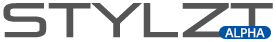
<style>
.page{position:relative;width:276px;height:42px;background:#ffffff}
.page>*{position:absolute;margin:0}
.t1{font:48.2px "Pirulen";color:#555555}
.t2{font:12px "Verdana";color:#fefefe}
</style>
<div class="page">
<p class="t1" style="left:3px;top:3px;width:270px;height:35px">STYLZT</p>
<p class="t2" style="left:225px;top:28px;width:40px;height:10px">ALPHA</p>
</div>
